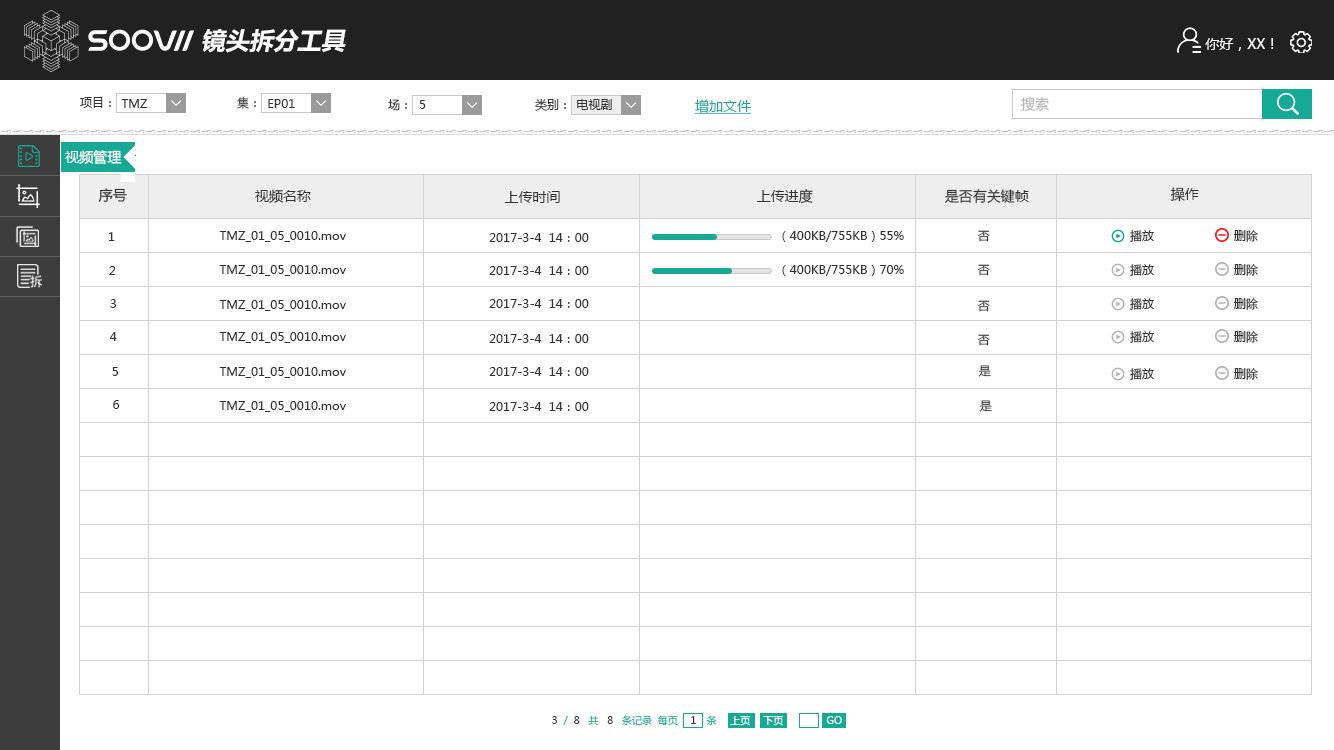
<style>
.page{position:relative;width:1334px;height:750px;background:#ffffff}
.page>*{position:absolute;margin:0}
.t1{font:24px "MicrosoftYaHei-Bold";color:#ffffff;font-style:italic}
.t2{font:14px "MicrosoftYaHei";color:#ffffff}
.t3{font:12px "MicrosoftYaHei";color:#333333}
.t4{font:12px "MicrosoftYaHei"}
.t5{font:14px "MicrosoftYaHei";color:#16a996;text-decoration:underline}
.t6{font:14px "MicrosoftYaHei";color:#b8b8b8}
.t7{font:14px "MicrosoftYaHei";color:#333333}
.t8{font:10px "MicrosoftYaHei";color:#16a996}
.t9{font:10px "MicrosoftYaHei";color:#333333}
.t10{font:10px "MicrosoftYaHei"}
.t11{font:10px "MicrosoftYaHei";color:#ffffff}
</style>
<div class="page">
<p class="t1" style="left:202px;top:29px;width:144px;height:24px">镜头拆分工具</p>
<p class="t2" style="left:1205px;top:38px;width:69px;height:13px">你好，XX！</p>
<p class="t3" style="left:80px;top:97px;width:31px;height:11px">项目：</p>
<p class="t3" style="left:121px;top:99px;width:27px;height:9px">TMZ</p>
<p class="t4" style="left:237px;top:97px;width:19px;height:12px">集：</p>
<p class="t3" style="left:268px;top:99px;width:27px;height:9px">EP01</p>
<p class="t3" style="left:388px;top:99px;width:19px;height:12px">场：</p>
<p class="t3" style="left:419px;top:100px;width:7px;height:9px">5</p>
<p class="t3" style="left:535px;top:98px;width:31px;height:13px">类别：</p>
<p class="t3" style="left:577px;top:99px;width:35px;height:11px">电视剧</p>
<p class="t5" style="left:695px;top:99px;width:56px;height:15px">增加文件</p>
<p class="t6" style="left:1021px;top:97px;width:28px;height:15px">搜索</p>
<p class="t2" style="left:65px;top:150px;width:57px;height:15px">视频管理</p>
<p class="t7" style="left:98px;top:188px;width:29px;height:14px">序号</p>
<p class="t7" style="left:255px;top:189px;width:56px;height:14px">视频名称</p>
<p class="t7" style="left:504px;top:191px;width:56px;height:12px">上传时间</p>
<p class="t7" style="left:757px;top:189px;width:56px;height:15px">上传进度</p>
<p class="t7" style="left:945px;top:189px;width:84px;height:15px">是否有关键帧</p>
<p class="t7" style="left:1170px;top:187px;width:29px;height:15px">操作</p>
<p class="t3" style="left:108px;top:232px;width:7px;height:9px">1</p>
<p class="t3" style="left:219px;top:231px;width:127px;height:11px">TMZ_01_05_0010.mov</p>
<p class="t3" style="left:489px;top:233px;width:100px;height:9px">2017-3-4  14：00</p>
<p class="t3" style="left:782px;top:231px;width:122px;height:11px">（400KB/755KB）55%</p>
<p class="t3" style="left:978px;top:230px;width:12px;height:12px">否</p>
<p class="t3" style="left:1130px;top:230px;width:24px;height:12px">播放</p>
<p class="t3" style="left:1234px;top:230px;width:24px;height:12px">删除</p>
<p class="t3" style="left:109px;top:266px;width:7px;height:9px">2</p>
<p class="t3" style="left:219px;top:265px;width:127px;height:11px">TMZ_01_05_0010.mov</p>
<p class="t3" style="left:489px;top:266px;width:100px;height:9px">2017-3-4  14：00</p>
<p class="t3" style="left:782px;top:265px;width:122px;height:11px">（400KB/755KB）70%</p>
<p class="t3" style="left:978px;top:264px;width:12px;height:12px">否</p>
<p class="t3" style="left:1130px;top:264px;width:24px;height:12px">播放</p>
<p class="t3" style="left:1234px;top:264px;width:24px;height:12px">删除</p>
<p class="t3" style="left:110px;top:299px;width:6px;height:9px">3</p>
<p class="t3" style="left:219px;top:300px;width:127px;height:11px">TMZ_01_05_0010.mov</p>
<p class="t3" style="left:489px;top:299px;width:100px;height:9px">2017-3-4  14：00</p>
<p class="t3" style="left:978px;top:300px;width:12px;height:12px">否</p>
<p class="t3" style="left:1130px;top:298px;width:24px;height:12px">播放</p>
<p class="t3" style="left:1234px;top:298px;width:24px;height:12px">删除</p>
<p class="t3" style="left:109px;top:332px;width:8px;height:9px">4</p>
<p class="t3" style="left:219px;top:332px;width:127px;height:11px">TMZ_01_05_0010.mov</p>
<p class="t3" style="left:489px;top:334px;width:100px;height:9px">2017-3-4  14：00</p>
<p class="t3" style="left:978px;top:334px;width:12px;height:12px">否</p>
<p class="t3" style="left:1130px;top:331px;width:24px;height:12px">播放</p>
<p class="t3" style="left:1234px;top:331px;width:24px;height:12px">删除</p>
<p class="t4" style="left:978px;top:365px;width:13px;height:12px">是</p>
<p class="t3" style="left:112px;top:367px;width:6px;height:9px">5</p>
<p class="t3" style="left:219px;top:367px;width:127px;height:11px">TMZ_01_05_0010.mov</p>
<p class="t3" style="left:489px;top:367px;width:100px;height:9px">2017-3-4  14：00</p>
<p class="t3" style="left:1130px;top:368px;width:24px;height:12px">播放</p>
<p class="t3" style="left:1234px;top:368px;width:24px;height:12px">删除</p>
<p class="t3" style="left:113px;top:400px;width:7px;height:9px">6</p>
<p class="t3" style="left:219px;top:401px;width:127px;height:11px">TMZ_01_05_0010.mov</p>
<p class="t4" style="left:979px;top:400px;width:13px;height:12px">是</p>
<p class="t3" style="left:489px;top:402px;width:100px;height:9px">2017-3-4  14：00</p>
<p class="t8" style="left:552px;top:715px;width:100px;height:11px"><span class="t9">3  </span>/  <span class="t9">8   </span>共   <span class="t9">8   </span>条记录</p>
<p class="t10" style="left:657px;top:715px;width:21px;height:11px">每页</p>
<p class="t9" style="left:691px;top:716px;width:5px;height:8px">1</p>
<p class="t10" style="left:706px;top:715px;width:11px;height:11px">条</p>
<p class="t11" style="left:730px;top:716px;width:21px;height:10px">上页</p>
<p class="t11" style="left:763px;top:716px;width:21px;height:10px">下页</p>
<p class="t11" style="left:826px;top:716px;width:16px;height:8px">GO</p>
</div>
